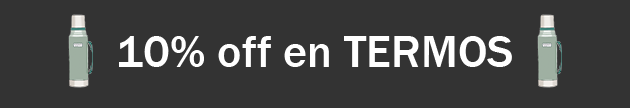
<style>
.page{position:relative;width:630px;height:108px;background:#333333}
.page>*{position:absolute;margin:0}
.t1{font:46.1px "FranklinGothic-Medium";color:#ffffff}
</style>
<div class="page">
<p class="t1" style="left:119px;top:36px;width:393px;height:31px">10% off en TERMOS</p>
</div>
